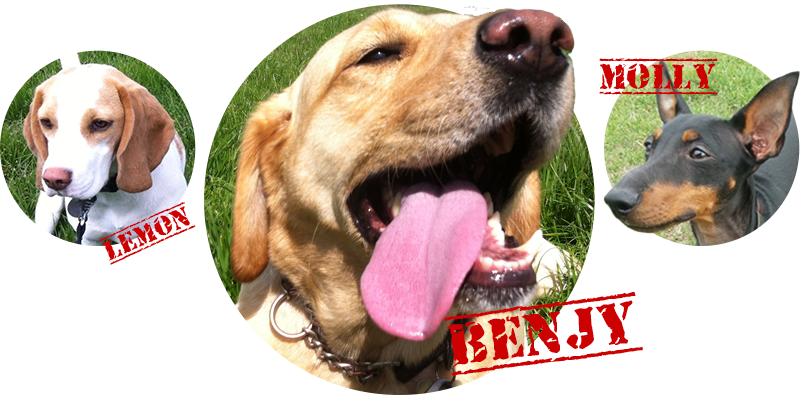
<style>
.page{position:relative;width:800px;height:400px;background:#ffffff}
.page>*{position:absolute;margin:0}
.t1{font:36px "OldStamper";color:#cc0202}
.t2{font:28px "OldStamper";color:#cc0202}
.t3{font:60px "OldStamper";color:#cc0202}
</style>
<div class="page">
<p class="t1" style="left:599px;top:58px;width:119px;height:37px">Molly</p>
<p class="t2" style="left:100px;top:202px;width:96px;height:63px;rotate:-24deg">LEMON</p>
<p class="t3" style="left:444px;top:291px;width:199px;height:85px;rotate:-7deg">BENJY</p>
</div>
